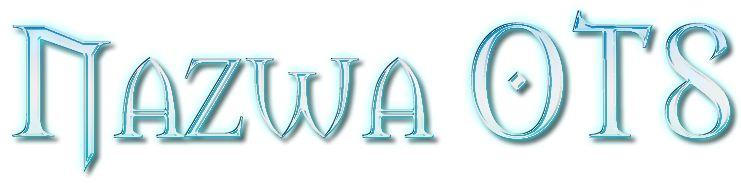
<style>
.page{position:relative;width:741px;height:184px;background:#ffffff}
.page>*{position:absolute;margin:0}
.t1{font:150px "Morpheus";font-variant:small-caps}
</style>
<div class="page">
<p class="t1" style="left:12px;top:10px;width:719px;height:163px">Nazwa OTS</p>
</div>
